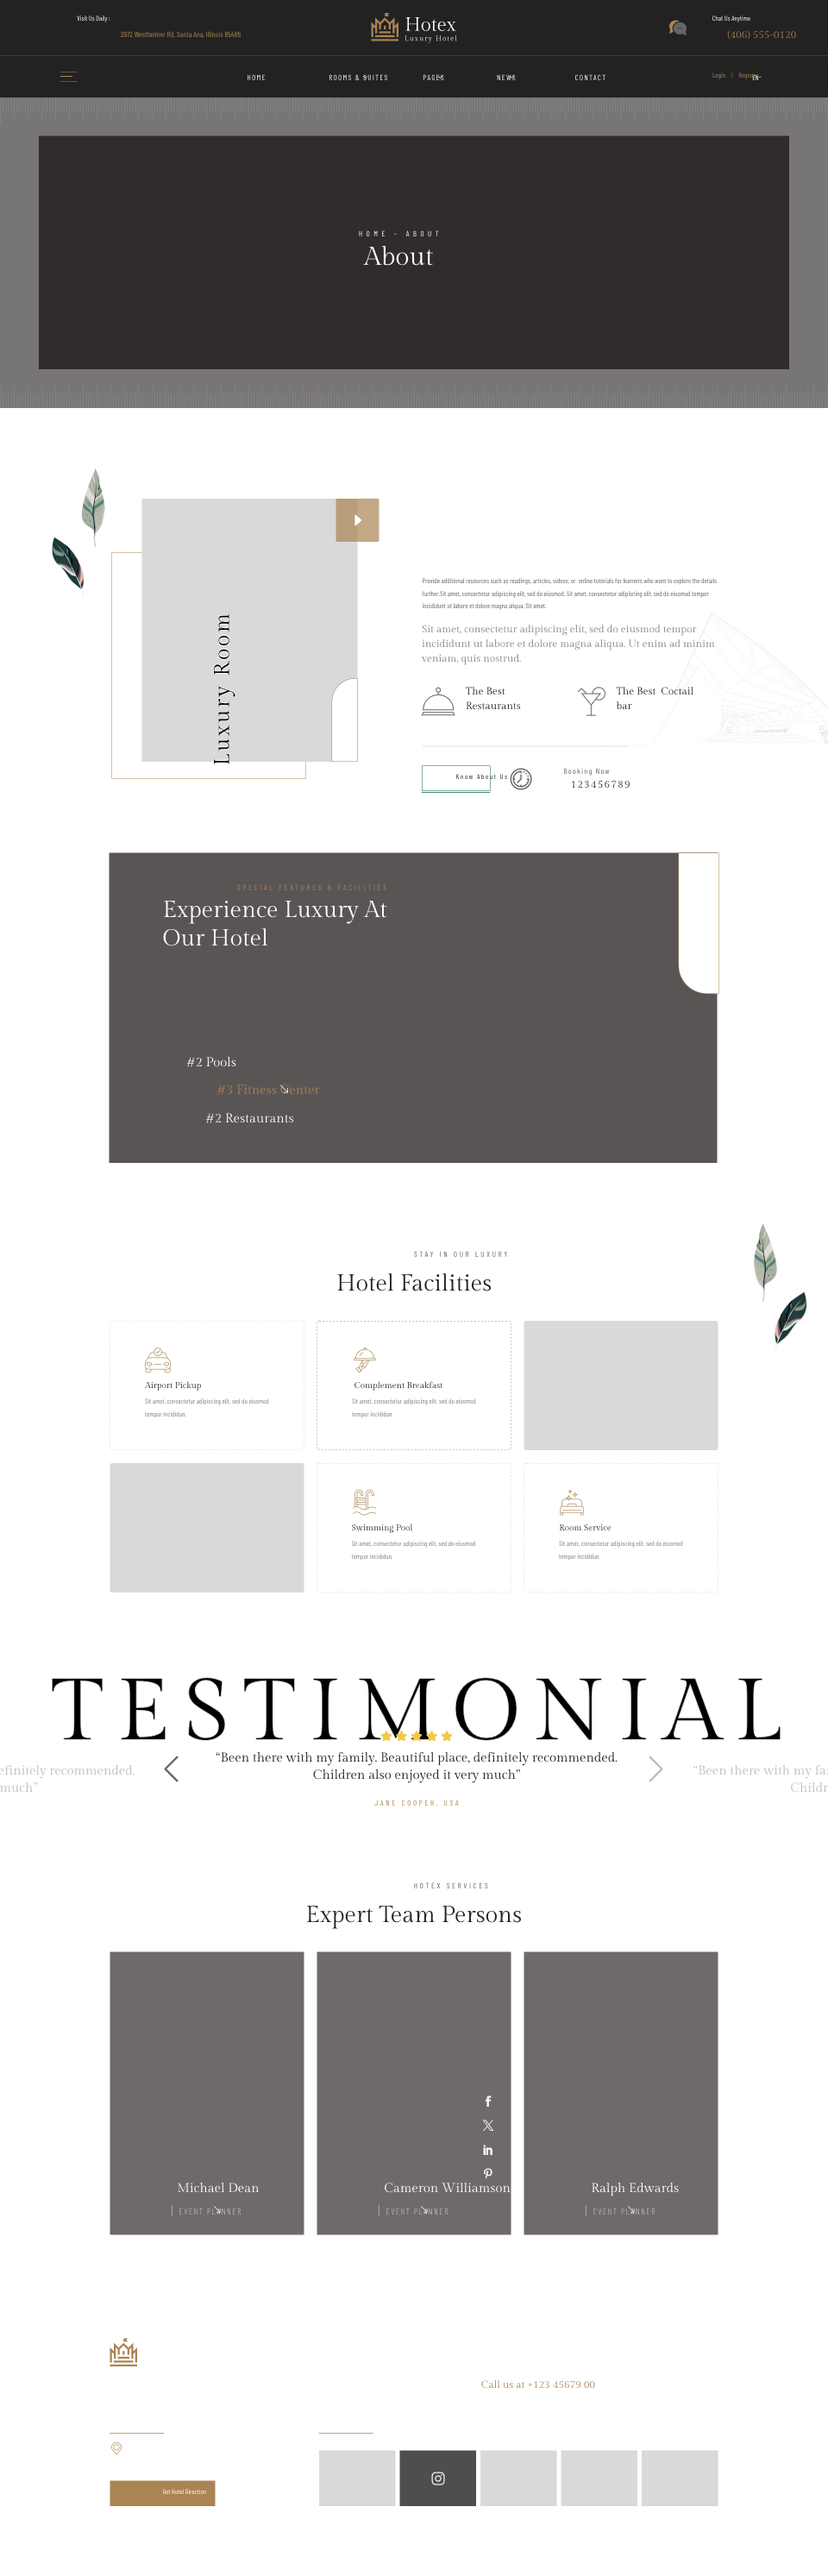
<style>
.page{position:relative;width:828px;height:2576px;background:#ffffff}
.page>*{position:absolute;margin:0}
.t1{font:6.9px "BarlowCondensed-Regular"}
.t2{font:7.8px "BarlowCondensed-Regular";color:#aa8453}
.t3{font:10.4px "GildaDisplay-Regular";color:#aa8453}
.t4{font:7.8px "BarlowCondensed-Regular";letter-spacing:0.15em;text-transform:uppercase}
.t5{font:6.9px "BarlowCondensed-Regular";color:#ffffff}
.t6{font:7.8px "BarlowCondensed-Regular";letter-spacing:0.5em;color:#ffffff;text-transform:uppercase}
.t7{font:25.9px "GildaDisplay-Regular";color:#ffffff}
.t8{font:6.9px/12.5px "BarlowCondensed-Regular";color:#666666}
.t9{font:21.6px "GildaDisplay-Regular";letter-spacing:0.1em;color:#000000}
.t10{font:10.4px/14.7px "GildaDisplay-Regular";color:#808287}
.t11{font:10.4px/14.7px "GildaDisplay-Regular";color:#222222}
.t12{font:6.9px "BarlowCondensed-Regular";letter-spacing:0.2em}
.t13{font:7.8px "BarlowCondensed-Regular";letter-spacing:0.15em}
.t14{font:10.4px "GildaDisplay-Regular";letter-spacing:0.1em}
.t15{font:7.8px "BarlowCondensed-Regular";letter-spacing:0.3em;color:#aa8453;text-transform:uppercase}
.t16{font:23.3px "GildaDisplay-Regular";color:#ffffff}
.t17{font:12.9px "GildaDisplay-Regular";color:#ffffff}
.t18{font:12.9px "GildaDisplay-Regular";color:#aa8453}
.t19{font:7.8px "BarlowCondensed-Regular";letter-spacing:0.3em;color:#666666;text-transform:uppercase}
.t20{font:23.3px "GildaDisplay-Regular";color:#222222}
.t21{font:8.6px "GildaDisplay-Regular"}
.t22{font:6.9px/12.5px "BarlowCondensed-Regular"}
.t23{font:86.3px "GildaDisplay-Regular";letter-spacing:0.16em;color:#000000;text-transform:uppercase}
.t24{font:12.9px/17.3px "GildaDisplay-Regular";color:#222222}
.t25{font:7.8px "BarlowCondensed-Regular";letter-spacing:0.3em;text-transform:uppercase}
.t26{font:8.6px "BarlowCondensed-Thin";letter-spacing:0.15em;text-transform:uppercase}
.t27{font:12.9px "BarlowCondensed-Thin";letter-spacing:0.15em;text-transform:uppercase}
</style>
<div class="page">
<p class="t1" style="left:77px;top:16px;width:33px;height:6px">Visit Us Daily :</p>
<p class="t1" style="left:713px;top:16px;width:38px;height:6px">Chat Us Anytime</p>
<p class="t2" style="left:121px;top:31px;width:120px;height:7px">2972 Westheimer Rd. Santa Ana, Illinois 85486</p>
<p class="t3" style="left:727px;top:30px;width:69px;height:10px">(406) 555-0120</p>
<p class="t4" style="left:248px;top:74px;width:18px;height:7px">Home</p>
<p class="t4" style="left:329px;top:74px;width:58px;height:7px">Rooms &amp; Suites</p>
<p class="t4" style="left:423px;top:74px;width:21px;height:7px">Pages</p>
<p class="t4" style="left:497px;top:74px;width:19px;height:7px">News</p>
<p class="t4" style="left:575px;top:74px;width:31px;height:7px">Contact</p>
<p class="t1" style="left:713px;top:72px;width:45px;height:7px">Login    /    Register</p>
<p class="t5" style="left:752px;top:75px;width:7px;height:5px">EN</p>
<p class="t6" style="left:359px;top:230px;width:80px;height:7px">Home - About</p>
<p class="t7" style="left:362px;top:245px;width:71px;height:21px">About</p>
<p class="t8" style="left:422px;top:578px;width:295px;height:32px">Provide additional resources such as readings, articles, videos, or  online tutorials for learners who want to explore the details further.Sit amet, consectetur adipiscing elit, sed do eiusmod. Sit amet, consectetur adipiscing elit, sed do eiusmod tempor incididunt ut labore et dolore magna aliqua. Sit amet.</p>
<p class="t9" style="left:213px;top:613px;width:23px;height:152px;rotate:-90deg">Luxury Room</p>
<p class="t10" style="left:421px;top:625px;width:294px;height:40px">Sit amet, consectetur adipiscing elit, sed do eiusmod tempor incididunt ut labore et dolore magna aliqua. Ut enim ad minim veniam, quis nostrud.</p>
<p class="t11" style="left:466px;top:687px;width:55px;height:23px">The Best Restaurants</p>
<p class="t11" style="left:616px;top:687px;width:78px;height:23px">The Best  Coctail bar</p>
<p class="t12" style="left:456px;top:774px;width:51px;height:6px">Know About Us</p>
<p class="t13" style="left:564px;top:768px;width:46px;height:8px">Booking Now</p>
<p class="t14" style="left:571px;top:780px;width:59px;height:9px">123456789</p>
<p class="t15" style="left:237px;top:884px;width:149px;height:7px">Special Features &amp; Facilities</p>
<p class="t16" style="left:163px;top:901px;width:224px;height:45px">Experience Luxury At Our Hotel</p>
<p class="t17" style="left:186px;top:1056px;width:50px;height:11px">#2 Pools</p>
<p class="t18" style="left:217px;top:1084px;width:103px;height:11px">#3 Fitness Center</p>
<p class="t17" style="left:206px;top:1113px;width:88px;height:10px">#2 Restaurants</p>
<p class="t19" style="left:414px;top:1251px;width:93px;height:7px">Stay in our luxury</p>
<p class="t20" style="left:337px;top:1273px;width:155px;height:18px">Hotel Facilities</p>
<p class="t21" style="left:144px;top:1381px;width:57px;height:10px">Airport Pickup</p>
<p class="t21" style="left:355px;top:1381px;width:88px;height:10px">Complement Breakfast</p>
<p class="t22" style="left:145px;top:1398px;width:124px;height:20px">Sit amet, consectetur adipiscing elit, sed do eiusmod tempor incididun.</p>
<p class="t22" style="left:352px;top:1398px;width:124px;height:20px">Sit amet, consectetur adipiscing elit, sed do eiusmod tempor incididun.</p>
<p class="t21" style="left:352px;top:1524px;width:61px;height:9px">Swimming Pool</p>
<p class="t21" style="left:559px;top:1524px;width:53px;height:7px">Room Service</p>
<p class="t22" style="left:351px;top:1541px;width:124px;height:20px">Sit amet, consectetur adipiscing elit, sed do eiusmod tempor incididun.</p>
<p class="t22" style="left:559px;top:1541px;width:124px;height:20px">Sit amet, consectetur adipiscing elit, sed do eiusmod tempor incididun.</p>
<p class="t23" style="left:52px;top:1678px;width:729px;height:62px">Testimonial</p>
<p class="t24" style="left:216px;top:1751px;width:402px;height:32px;text-align:center">“Been there with my family. Beautiful place, definitely recommended. Children also enjoyed it very much”</p>
<p class="t15" style="left:374px;top:1800px;width:85px;height:6px">Jane Cooper, USA</p>
<p class="t25" style="left:414px;top:1882px;width:74px;height:7px">Hotex SERVICES</p>
<p class="t20" style="left:306px;top:1906px;width:216px;height:23px">Expert Team Persons</p>
<p class="t17" style="left:178px;top:2182px;width:82px;height:11px">Michael Dean</p>
<p class="t17" style="left:385px;top:2182px;width:126px;height:11px">Cameron Williamson</p>
<p class="t17" style="left:592px;top:2182px;width:87px;height:14px">Ralph Edwards</p>
<p class="t26" style="left:171px;top:2204px;width:70px;height:12px"><span class="t27">| </span>Event Planner</p>
<p class="t26" style="left:378px;top:2204px;width:70px;height:12px"><span class="t27">| </span>Event Planner</p>
<p class="t26" style="left:585px;top:2204px;width:70px;height:12px"><span class="t27">| </span>Event Planner</p>
<p class="t3" style="left:481px;top:2380px;width:114px;height:9px">Call us at +123 45679 00</p>
<p class="t1" style="left:162px;top:2489px;width:44px;height:6px">Get Hotel Direction</p>
</div>
